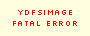
<style>
.page{position:relative;width:90px;height:36px;background:#ffffe0}
.page>*{position:absolute;margin:0}
.t1{font:9px "Silkscreen";color:#ff0000}
</style>
<div class="page">
<p class="t1" style="left:13px;top:10px;width:64px;height:16px;text-align:center">YDFSimage<br>FATAL ERROR</p>
</div>
